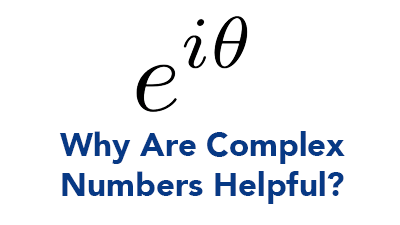
<style>
.page{position:relative;width:400px;height:225px;background:#ffffff}
.page>*{position:absolute;margin:0}
.t1{font:33px "Avenir-Black";color:#073985}
</style>
<div class="page">
<p class="t1" style="left:59px;top:131px;width:286px;height:73px;text-align:center">Why Are Complex<br>Numbers Helpful?</p>
</div>
